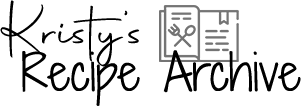
<style>
.page{position:relative;width:301px;height:106px;background:#ffffff}
.page>*{position:absolute;margin:0}
.t1{font:60px "Autography";color:#000000}
.t2{font:48px "ShadowsIntoLightTwo-Regular";color:#000000}
</style>
<div class="page">
<p class="t1" style="left:0px;top:0px;width:140px;height:67px">Kristy’s</p>
<p class="t2" style="left:22px;top:50px;width:279px;height:56px">Recipe Archive</p>
</div>
